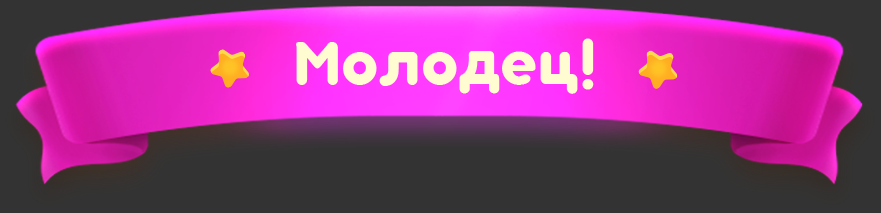
<style>
.page{position:relative;width:881px;height:213px;background:#333333}
.page>*{position:absolute;margin:0}
.t1{font:66.8px "BubbleboddyNeue-Bold";color:#fffcd1}
</style>
<div class="page">
<p class="t1" style="left:296px;top:38px;width:298px;height:56px">Молодец!</p>
</div>
